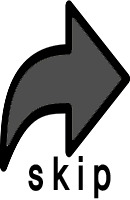
<style>
.page{position:relative;width:130px;height:200px;background:#ffffff}
.page>*{position:absolute;margin:0}
.t1{font:47.1px "HaanYGodic25";letter-spacing:0.1em;color:#000000;scale:0.65 1}
</style>
<div class="page">
<p class="t1" style="left:28px;top:156px;width:83px;height:43px">skip</p>
</div>
